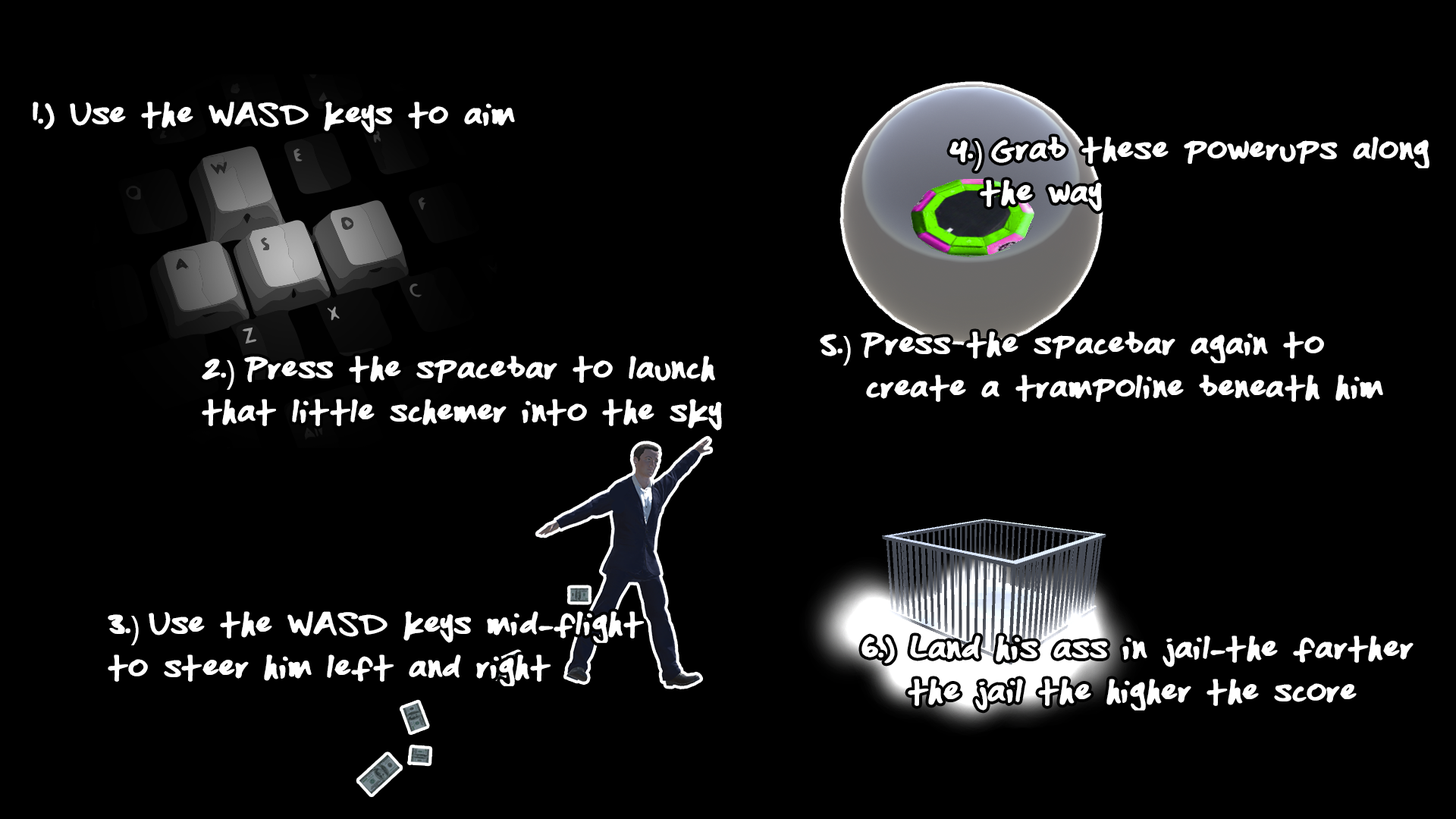
<style>
.page{position:relative;width:1456px;height:819px;background:#000000}
.page>*{position:absolute;margin:0}
.t1{font:36.4px "emilyyyyyy";color:#ffffff}
.t2{font:36.4px "MyriadPro-Regular";color:#ffffff}
</style>
<div class="page">
<p class="t1" style="left:33px;top:102px;width:482px;height:31px">1.) Use the WASD keys to aim</p>
<p class="t1" style="left:949px;top:136px;width:480px;height:76px">4.<span class="t2">) </span>Grab these powerups along<br>  the way</p>
<p class="t1" style="left:820px;top:331px;width:563px;height:71px">5.<span class="t2">) </span>Press the s[pacebar again to<br>   create a trampoline beneath him</p>
<p class="t1" style="left:202px;top:356px;width:520px;height:75px">2.<span class="t2">) </span>Press the spacebar to launch<br>that little schemer into the sky</p>
<p class="t1" style="left:108px;top:611px;width:536px;height:75px">3.<span class="t2">) </span>Use the WASD keys mid-flight<br>to steer him left and right</p>
<p class="t1" style="left:861px;top:635px;width:553px;height:76px">6.) Land his ass in jail-the farther<br>   the jail the higher the score</p>
</div>
